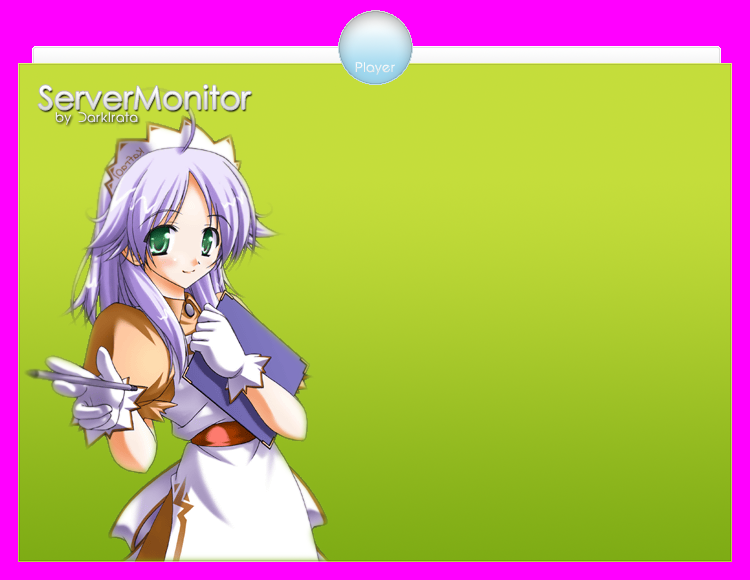
<style>
.page{position:relative;width:750px;height:580px}
.page>*{position:absolute;margin:0}
.t1{font:13px "EpicFusion";color:#eef1f4}
.t2{font:32px "CenturyGothic";color:#eeeeee}
.t3{font:13px "EpicFusion";color:#e5e5e5}
</style>
<div class="page">
<p class="t1" style="left:355px;top:62px;width:40px;height:13px">Player</p>
<p class="t2" style="left:38px;top:84px;width:213px;height:26px">ServerMonitor</p>
<p class="t3" style="left:55px;top:112px;width:83px;height:13px">by DarkIrata</p>
</div>
